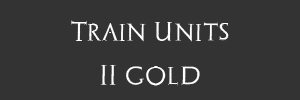
<style>
.page{position:relative;width:300px;height:100px;background:#333333}
.page>*{position:absolute;margin:0}
.t1{font:20.2px "Archeologicaps";color:#ffffff}
.t2{font:20.8px "Archeologicaps";color:#ffffff}
</style>
<div class="page">
<p class="t1" style="left:71px;top:20px;width:158px;height:22px">Train Units</p>
<p class="t2" style="left:100px;top:64px;width:100px;height:22px">II gold</p>
</div>
